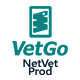
<style>
.page{position:relative;width:80px;height:80px;background:#ffffff}
.page>*{position:absolute;margin:0}
.t1{font:10.4px/8.3px "SegoeUI-Semibold";letter-spacing:-0.01em;color:#051925;scale:1.1 1}
</style>
<div class="page">
<p class="t1" style="left:23px;top:59px;width:35px;height:16px;text-align:center">NetVet<br>Prod</p>
</div>
